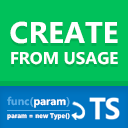
<style>
.page{position:relative;width:128px;height:128px;background:#00c15a}
.page>*{position:absolute;margin:0}
.t1{font:16.9px/21.4px "MicrosoftPhagsPa-Bold";color:#ffffff}
.t2{font:30.1px/21.4px "MicrosoftPhagsPa-Bold";color:#ffffff}
.t3{font:10.9px "MicrosoftPhagsPa-Bold";color:#5aaee6}
.t4{font:10.9px "MicrosoftPhagsPa-Bold";color:#ffffff}
.t5{font:6.6px "MicrosoftPhagsPa-Bold";color:#ffffff}
</style>
<div class="page">
<p class="t1" style="left:10px;top:21px;width:108px;height:44px;text-align:center"><span class="t2">CREATE<br></span>FROM USAGE</p>
<p class="t3" style="left:7px;top:96px;width:63px;height:12px">func(<span class="t4">param</span>)</p>
<p class="t5" style="left:7px;top:113px;width:63px;height:7px">param = new Type()</p>
</div>
